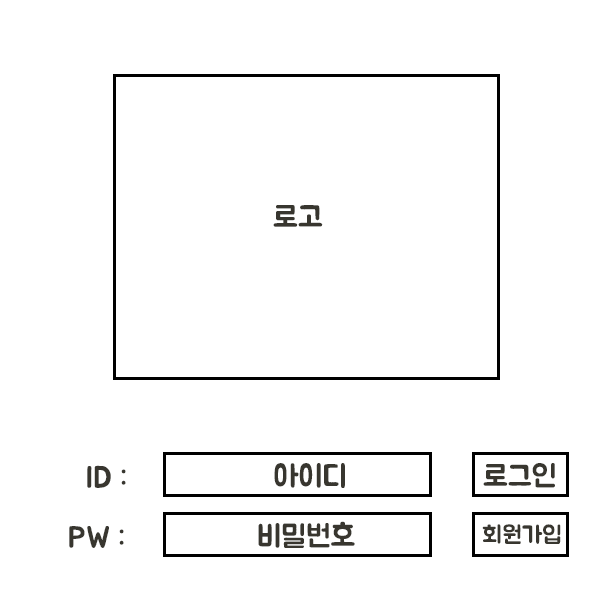
<style>
.page{position:relative;width:600px;height:600px;background:#ffffff}
.page>*{position:absolute;margin:0}
.t1{font:30.6px "BMJUA";color:#38362f}
.t2{font:24px "BMJUA";color:#38362f}
</style>
<div class="page">
<p class="t1" style="left:273px;top:205px;width:50px;height:22px">로고</p>
<p class="t1" style="left:87px;top:465px;width:39px;height:23px">ID :</p>
<p class="t1" style="left:274px;top:463px;width:71px;height:25px">아이디</p>
<p class="t1" style="left:483px;top:463px;width:72px;height:25px">로그인</p>
<p class="t1" style="left:258px;top:521px;width:97px;height:27px">비밀번호</p>
<p class="t1" style="left:69px;top:526px;width:55px;height:22px">PW :</p>
<p class="t2" style="left:482px;top:524px;width:79px;height:20px">회원가입</p>
</div>
